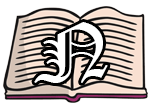
<style>
.page{position:relative;width:154px;height:107px;background:#ffffff}
.page>*{position:absolute;margin:0}
.t1{font:75px "OldEnglishTextMT";color:#ffffff}
</style>
<div class="page">
<p class="t1" style="left:34px;top:22px;width:74px;height:61px">N</p>
</div>
